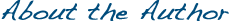
<style>
.page{position:relative;width:229px;height:23px;background:#ffffff}
.page>*{position:absolute;margin:0}
.t1{font:24px "Handwriting-Dakota";color:#004c7c;font-weight:bold}
</style>
<div class="page">
<p class="t1" style="left:1px;top:0px;width:228px;height:21px">About the Author</p>
</div>
